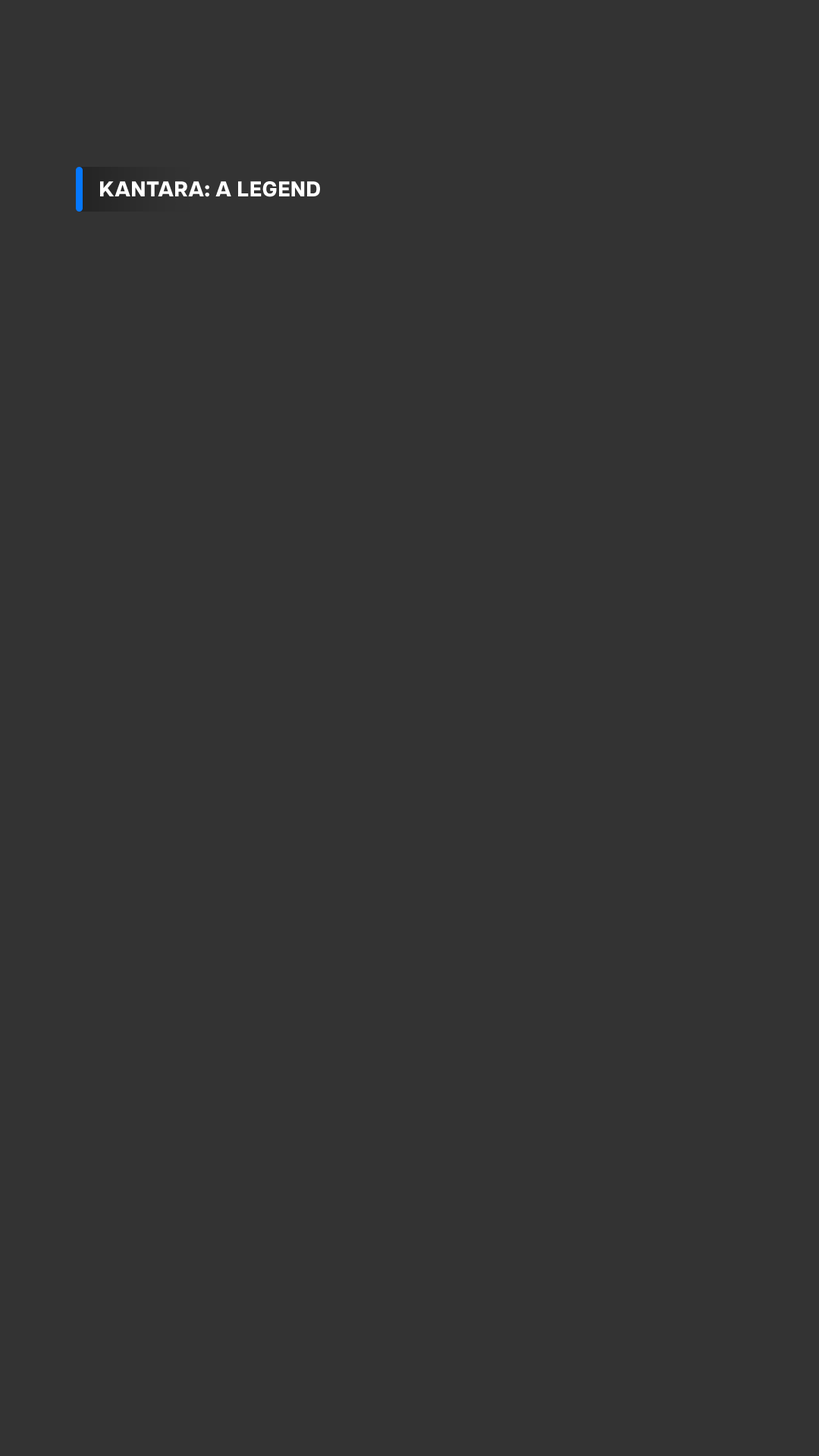
<style>
.page{position:relative;width:819px;height:1456px;background:#333333}
.page>*{position:absolute;margin:0}
.t1{font:21.3px "ArticulatCF-ExtraBold";letter-spacing:0.01em;color:#ffffff;text-transform:uppercase}
</style>
<div class="page">
<p class="t1" style="left:100px;top:181px;width:220px;height:16px">Kantara: A Legend</p>
</div>
